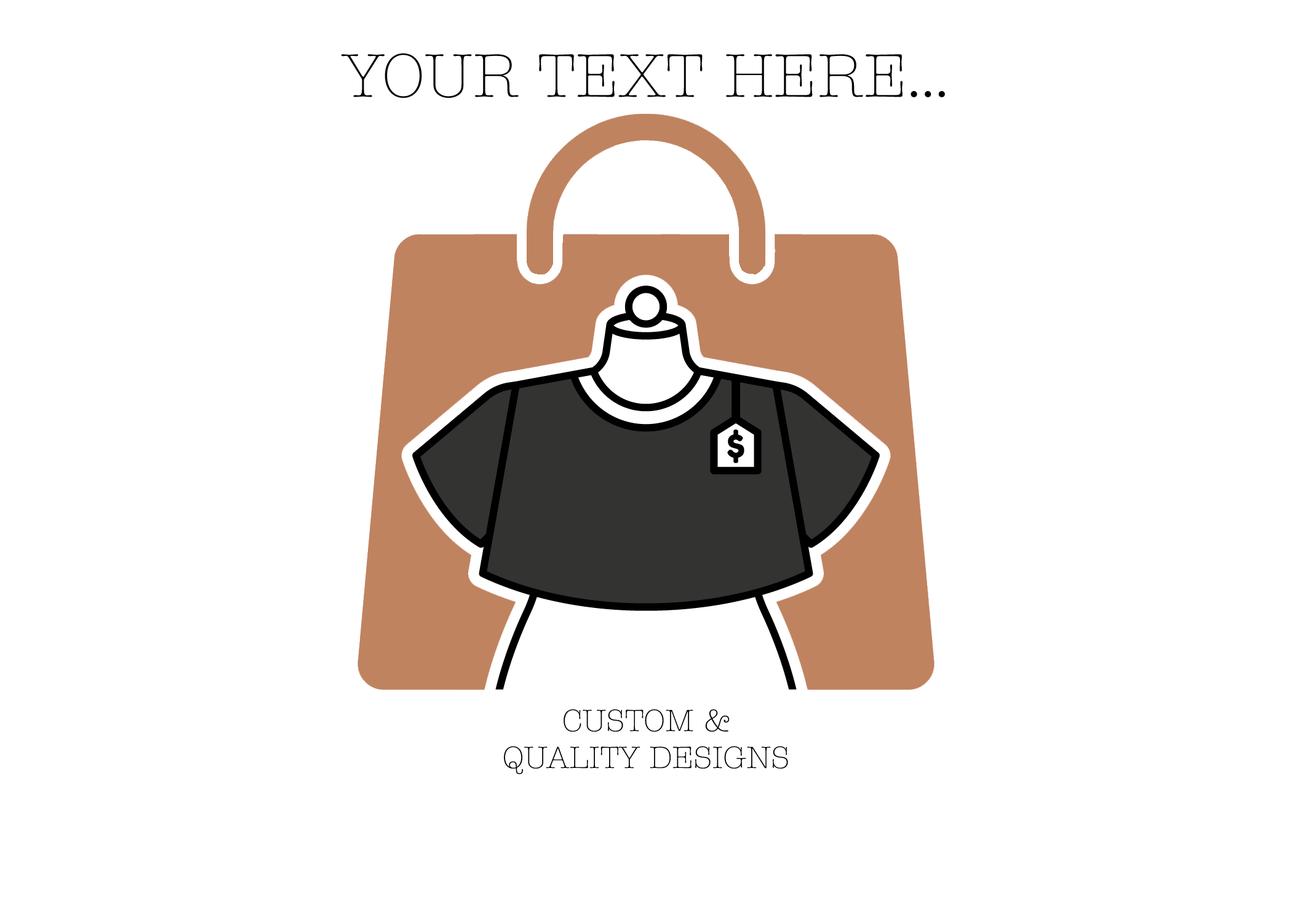
<style>
.page{position:relative;width:1292px;height:923px;background:#ffffff}
.page>*{position:absolute;margin:0}
.t1{font:61.5px "AmericanTypewriterITCPro-Lt";color:#000000}
.t2{font:30.8px "AmericanTypewriterITCPro-Lt";color:#000000}
</style>
<div class="page">
<p class="t1" style="left:341px;top:53px;width:604px;height:45px">YOUR TEXT HERE...</p>
<p class="t2" style="left:504px;top:709px;width:284px;height:65px;text-align:center">CUSTOM &amp; <br>QUALITY DESIGNS</p>
</div>
